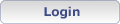
<style>
.page{position:relative;width:120px;height:24px}
.page>*{position:absolute;margin:0}
.t1{font:12px "Verdana-Bold";color:#404c88}
</style>
<div class="page">
<p class="t1" style="left:44px;top:6px;width:36px;height:13px">Login</p>
</div>
